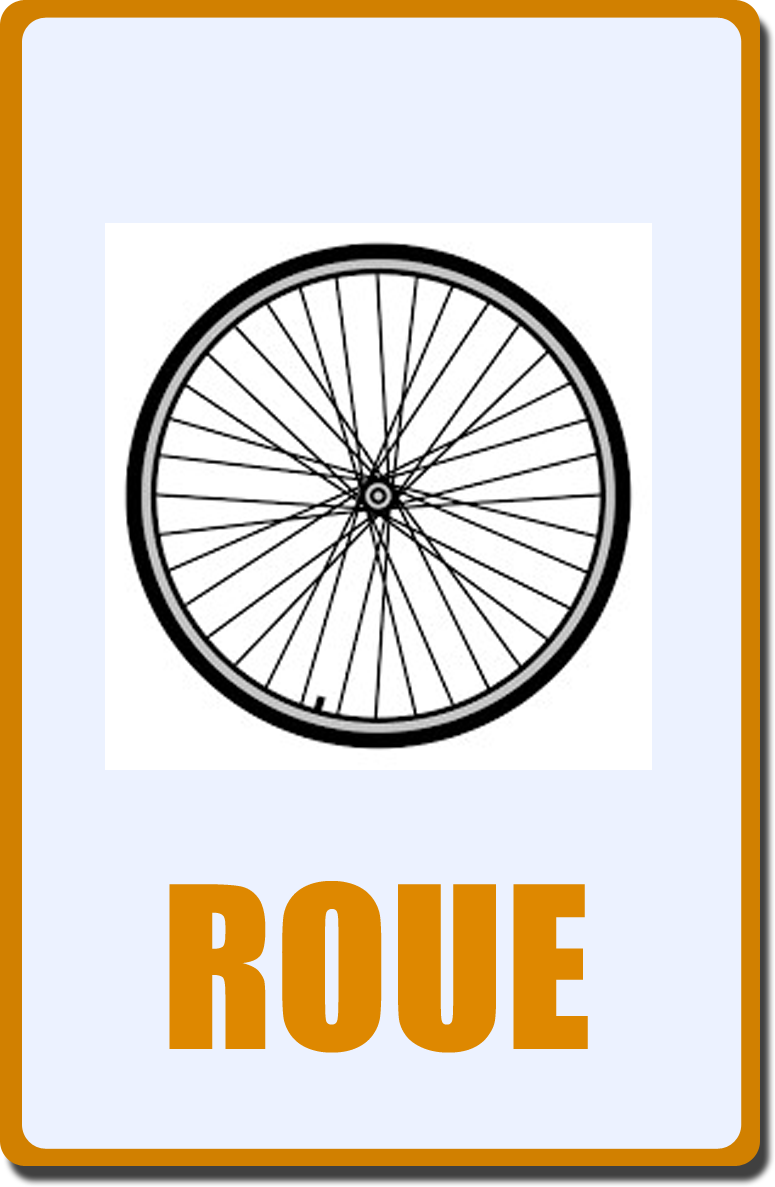
<style>
.page{position:relative;width:775px;height:1187px;background:#ecf2ff}
.page>*{position:absolute;margin:0}
.t1{font:208.3px "Impact";letter-spacing:0.005em;color:#de8800}
</style>
<div class="page">
<p class="t1" style="left:169px;top:881px;width:419px;height:172px">ROUE</p>
</div>
